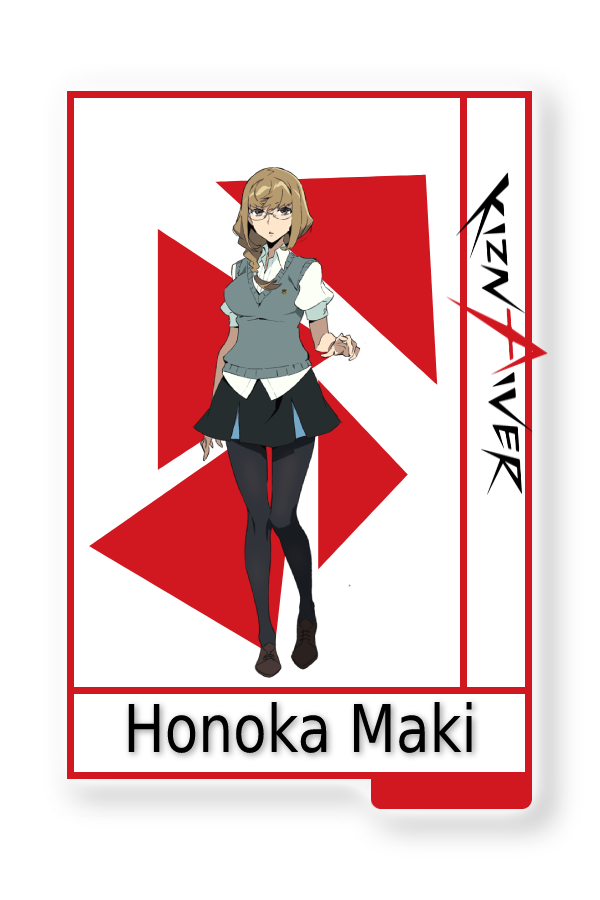
<style>
.page{position:relative;width:600px;height:900px;background:#ffffff}
.page>*{position:absolute;margin:0}
.t1{font:65.8px "CoolveticaRg-Regular";color:#000000;scale:0.84 1}
</style>
<div class="page">
<p class="t1" style="left:128px;top:702px;width:344px;height:51px">Honoka Maki</p>
</div>
